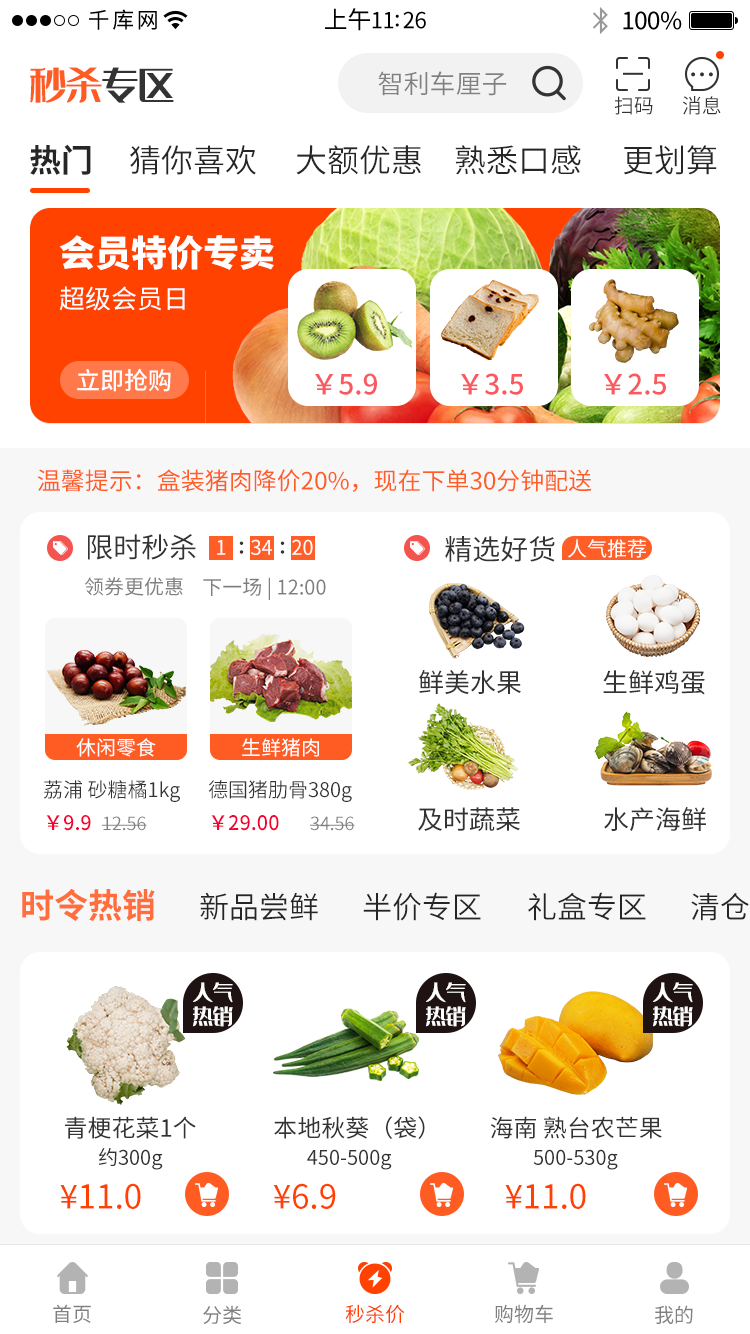
<style>
.page{position:relative;width:750px;height:1334px;background:#ffffff}
.page>*{position:absolute;margin:0}
.t1{font:22px "SourceHanSansCN-Regular";letter-spacing:0.12em;color:#000000}
.t2{font:22px "SourceHanSansCN-Regular";letter-spacing:-0.02em;color:#000000}
.t3{font:24px "SourceHanSansCN-Regular";letter-spacing:-0.02em;color:#000000}
.t4{font:36px "35--Regular";color:#ff5c23}
.t5{font:36px "35--Regular";color:#333333}
.t6{font:26px "SourceHanSansCN-Normal";color:#808080}
.t7{font:20px "SourceHanSansCN-Normal";color:#333333}
.t8{font:32px "SourceHanSansCN-Bold";color:#262626}
.t9{font:32px "SourceHanSansCN-Normal";color:#262626}
.t10{font:36px "SourceHanSansCN-Heavy";color:#fffefe}
.t11{font:26px "SourceHanSansCN-Regular";color:#fffefe}
.t12{font:24px "SourceHanSansCN-Medium";color:#fffefe}
.t13{font:28px "SourceHanSansCN-Medium";color:#fb5960}
.t14{font:24px "SourceHanSansCN-Regular";color:#ff5d24}
.t15{font:28px "SourceHanSansCN-Regular";color:#333333}
.t16{font:20px "SourceHanSansCN-Regular";color:#fffefe}
.t17{font:22px "SourceHanSansCN-Medium";color:#333333}
.t18{font:20px "SourceHanSansCN-Regular";color:#ffffff}
.t19{font:20px "SourceHanSansCN-Regular";color:#808080}
.t20{font:20px "SourceHanSansCN-Regular";color:#7e7e7e}
.t21{font:26px "SourceHanSansCN-Regular";color:#333333}
.t22{font:20px "SourceHanSansCN-Medium";color:#f40332}
.t23{font:18px "SourceHanSansCN-Normal";color:#808080}
.t24{font:34px "SourceHanSansCN-Bold";color:#ff6e3c}
.t25{font:30px "SourceHanSansCN-Normal";color:#252525}
.t26{font:20px "35--Regular";color:#ffffff}
.t27{font:24px "SourceHanSansCN-Regular";color:#333333}
.t28{font:20px "SourceHanSansCN-Regular";color:#333333}
.t29{font:33.2px "SourceHanSansCN-Regular";color:#ff4200}
.t30{font:20px "SourceHanSansCN-Regular";color:#ff4200}
</style>
<div class="page">
<p class="t1" style="left:89px;top:9px;width:68px;height:21px">千库网</p>
<p class="t2" style="left:325px;top:8px;width:101px;height:23px"><span class="t3">上午</span>11:26</p>
<p class="t3" style="left:623px;top:11px;width:59px;height:19px">100%</p>
<p class="t4" style="left:30px;top:67px;width:144px;height:36px">秒杀<span class="t5">专区</span></p>
<p class="t6" style="left:378px;top:71px;width:129px;height:25px">智利车厘子</p>
<p class="t7" style="left:614px;top:96px;width:39px;height:19px">扫码</p>
<p class="t7" style="left:682px;top:96px;width:39px;height:19px">消息</p>
<p class="t8" style="left:30px;top:144px;width:61px;height:31px">热门</p>
<p class="t9" style="left:130px;top:145px;width:126px;height:30px">猜你喜欢</p>
<p class="t9" style="left:296px;top:145px;width:125px;height:30px">大额优惠</p>
<p class="t9" style="left:455px;top:145px;width:126px;height:30px">熟悉口感</p>
<p class="t9" style="left:623px;top:145px;width:94px;height:30px">更划算</p>
<p class="t10" style="left:59px;top:235px;width:215px;height:36px">会员特价专卖</p>
<p class="t11" style="left:59px;top:286px;width:126px;height:25px">超级会员日</p>
<p class="t12" style="left:77px;top:368px;width:94px;height:24px">立即抢购</p>
<p class="t13" style="left:315px;top:373px;width:62px;height:22px">￥5.9</p>
<p class="t13" style="left:461px;top:373px;width:62px;height:22px">￥3.5</p>
<p class="t13" style="left:604px;top:373px;width:62px;height:22px">￥2.5</p>
<p class="t14" style="left:37px;top:469px;width:555px;height:23px">温馨提示：盒装猪肉降价20%，现在下单30分钟配送</p>
<p class="t15" style="left:88px;top:534px;width:108px;height:26px">限时秒杀</p>
<p class="t16" style="left:217px;top:540px;width:9px;height:15px">1</p>
<p class="t17" style="left:239px;top:541px;width:5px;height:13px">:</p>
<p class="t16" style="left:251px;top:539px;width:21px;height:16px">34</p>
<p class="t17" style="left:280px;top:541px;width:5px;height:13px">:</p>
<p class="t16" style="left:292px;top:539px;width:21px;height:16px">20</p>
<p class="t15" style="left:445px;top:536px;width:110px;height:26px">精选好货</p>
<p class="t18" style="left:568px;top:539px;width:78px;height:19px">人气推荐</p>
<p class="t19" style="left:84px;top:577px;width:99px;height:19px">领券更优惠</p>
<p class="t20" style="left:203px;top:577px;width:123px;height:23px">下一场 | 12:00</p>
<p class="t21" style="left:419px;top:670px;width:102px;height:24px">鲜美水果</p>
<p class="t21" style="left:603px;top:670px;width:102px;height:25px">生鲜鸡蛋</p>
<p class="t18" style="left:76px;top:738px;width:80px;height:19px">休闲零食</p>
<p class="t18" style="left:242px;top:738px;width:77px;height:19px">生鲜猪肉</p>
<p class="t7" style="left:43px;top:780px;width:137px;height:22px">荔浦 砂糖橘1kg</p>
<p class="t7" style="left:208px;top:780px;width:144px;height:22px">德国猪肋骨380g</p>
<p class="t21" style="left:418px;top:807px;width:102px;height:24px">及时蔬菜</p>
<p class="t21" style="left:604px;top:807px;width:102px;height:24px">水产海鲜</p>
<p class="t22" style="left:46px;top:815px;width:45px;height:16px">￥9.9</p>
<p class="t23" style="left:102px;top:816px;width:45px;height:15px">12.56</p>
<p class="t22" style="left:211px;top:815px;width:68px;height:16px">￥29.00</p>
<p class="t23" style="left:310px;top:816px;width:45px;height:15px">34.56</p>
<p class="t24" style="left:22px;top:888px;width:133px;height:34px">时令热销</p>
<p class="t25" style="left:200px;top:892px;width:118px;height:29px">新品尝鲜</p>
<p class="t25" style="left:363px;top:892px;width:118px;height:29px">半价专区</p>
<p class="t25" style="left:528px;top:892px;width:118px;height:29px">礼盒专区</p>
<p class="t25" style="left:691px;top:892px;width:58px;height:29px">清仓</p>
<p class="t26" style="left:193px;top:982px;width:40px;height:45px">人气<br>热销</p>
<p class="t26" style="left:426px;top:982px;width:40px;height:45px">人气<br>热销</p>
<p class="t26" style="left:653px;top:982px;width:40px;height:45px">人气<br>热销</p>
<p class="t27" style="left:65px;top:1116px;width:131px;height:23px">青梗花菜1个</p>
<p class="t27" style="left:274px;top:1116px;width:151px;height:23px">本地秋葵（袋）</p>
<p class="t27" style="left:490px;top:1116px;width:172px;height:23px">海南 熟台农芒果</p>
<p class="t28" style="left:98px;top:1147px;width:65px;height:23px">约300g</p>
<p class="t28" style="left:307px;top:1149px;width:85px;height:21px">450-500g</p>
<p class="t28" style="left:533px;top:1149px;width:85px;height:21px">500-530g</p>
<p class="t29" style="left:60px;top:1183px;width:81px;height:26px">¥11.0</p>
<p class="t29" style="left:273px;top:1183px;width:63px;height:26px">¥6.9</p>
<p class="t29" style="left:505px;top:1183px;width:81px;height:26px">¥11.0</p>
<p class="t19" style="left:53px;top:1304px;width:38px;height:19px">首页</p>
<p class="t19" style="left:203px;top:1305px;width:39px;height:20px">分类</p>
<p class="t30" style="left:345px;top:1304px;width:60px;height:20px">秒杀价</p>
<p class="t19" style="left:495px;top:1304px;width:58px;height:20px">购物车</p>
<p class="t19" style="left:655px;top:1305px;width:38px;height:19px">我的</p>
</div>
